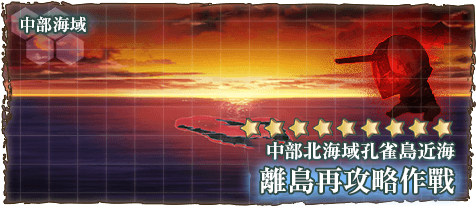
<style>
.page{position:relative;width:476px;height:206px}
.page>*{position:absolute;margin:0}
.t1{font:17px "RyuminPr6N-ExBold";color:#ffffff}
.t2{font:19px "RyuminPro-ExBold";color:#ffffff}
.t3{font:28px "RyuminPro-ExBold";color:#ffffff}
</style>
<div class="page">
<p class="t1" style="left:20px;top:16px;width:66px;height:17px">中部海域</p>
<p class="t2" style="left:267px;top:142px;width:188px;height:18px">中部北海域孔雀島近海</p>
<p class="t3" style="left:260px;top:167px;width:195px;height:27px">離島再攻略作戰</p>
</div>
